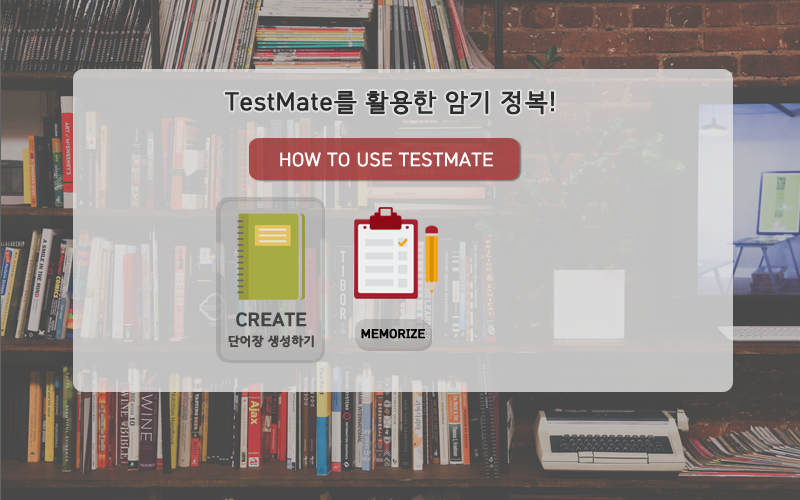
<style>
.page{position:relative;width:800px;height:500px}
.page>*{position:absolute;margin:0}
.t1{font:24px "HCRDotum";color:#2b2b2b;font-weight:bold}
.t2{font:18px "HCRDotum";color:#ffffff;font-weight:bold}
.t3{font:18px "HCRDotum-Bold";color:#2d2d2d;font-weight:bold}
.t4{font:12px "HCRDotum-Bold";color:#2d2d2d;font-weight:bold}
</style>
<div class="page">
<p class="t1" style="left:225px;top:91px;width:329px;height:24px">TestMate를 활용한 암기 정복!</p>
<p class="t2" style="left:280px;top:152px;width:213px;height:15px">HOW TO USE TESTMATE</p>
<p class="t3" style="left:236px;top:312px;width:71px;height:15px">CREATE</p>
<p class="t4" style="left:228px;top:335px;width:86px;height:13px">단어장 생성하기</p>
</div>
